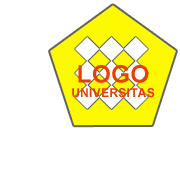
<style>
.page{position:relative;width:180px;height:179px;background:#ffffff}
.page>*{position:absolute;margin:0}
.t1{font:12px "Arial-BoldMT";letter-spacing:0.025em;color:#ed3d00}
.t2{font:24px "Arial-BoldMT";letter-spacing:0.025em;color:#ed3d00}
</style>
<div class="page">
<p class="t1" style="left:72px;top:65px;width:83px;height:33px;text-align:center"><span class="t2">LOGO<br></span>UNIVERSITAS</p>
</div>
